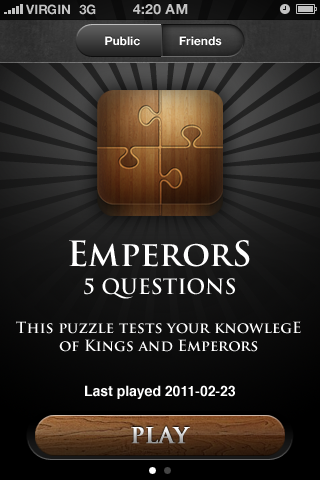
<style>
.page{position:relative;width:320px;height:480px}
.page>*{position:absolute;margin:0}
.t1{font:13px "HelveticaNeue-Bold";color:#c1c1c1;text-transform:uppercase}
.t2{font:13px "HelveticaNeue-Bold";color:#c2c2c2;text-transform:uppercase}
.t3{font:14px "HelveticaNeue-Bold";color:#c4c4c4;text-transform:uppercase}
.t4{font:12px "HelveticaNeue-Bold";color:#ffffff}
.t5{font:34px "TrajanPro-Bold";color:#ffffff}
.t6{font:20.5px "TrajanPro-Bold";color:#ffffff}
.t7{font:15px "TrajanPro-Bold";color:#ffffff}
.t8{font:14px "Helvetica-Bold";color:#ffffff}
.t9{font:21.5px "TrajanPro-Bold";font-weight:bold}
</style>
<div class="page">
<p class="t1" style="left:26px;top:4px;width:44px;height:11px">VIRGIN</p>
<p class="t2" style="left:79px;top:4px;width:17px;height:11px">3G</p>
<p class="t3" style="left:133px;top:4px;width:55px;height:11px">4:20 AM</p>
<p class="t4" style="left:105px;top:36px;width:35px;height:10px">Public</p>
<p class="t4" style="left:179px;top:36px;width:43px;height:10px">Friends</p>
<p class="t5" style="left:69px;top:240px;width:181px;height:27px">EmperorS</p>
<p class="t6" style="left:84px;top:278px;width:151px;height:21px">5 QUESTIONS</p>
<p class="t7" style="left:16px;top:321px;width:285px;height:31px;text-align:center">This puzzle tests your knowlegE<br>of Kings and Emperors</p>
<p class="t8" style="left:85px;top:385px;width:150px;height:14px">Last played 2011-02-23</p>
<p class="t9" style="left:131px;top:426px;width:59px;height:18px">PLAY</p>
</div>
